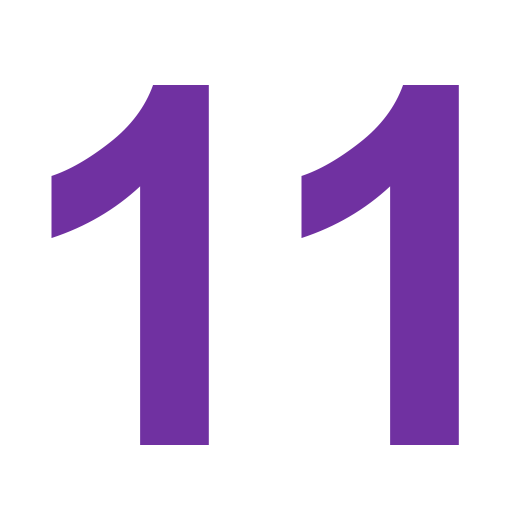
<style>
.page{position:relative;width:512px;height:512px;background:#ffffff}
.page>*{position:absolute;margin:0}
.t1{font:500px "Arial-BoldMT";color:#7031a1}
</style>
<div class="page">
<p class="t1" style="left:51px;top:85px;width:408px;height:360px">11</p>
</div>
